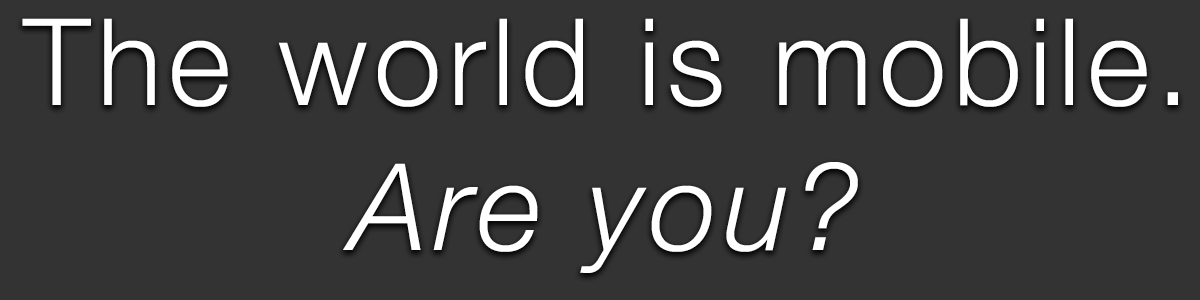
<style>
.page{position:relative;width:1200px;height:300px;background:#333333}
.page>*{position:absolute;margin:0}
.t1{font:120.8px "HelveticaNeue-Light";letter-spacing:0.055em;color:#ffffff}
.t2{font:120.8px "HelveticaNeue-LightItalic";letter-spacing:0.055em;color:#ffffff}
</style>
<div class="page">
<p class="t1" style="left:22px;top:18px;width:1156px;height:255px;text-align:center">The world is mobile.<br><span class="t2">Are you?</span></p>
</div>
